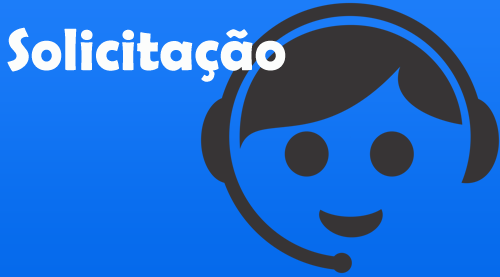
<style>
.page{position:relative;width:500px;height:277px}
.page>*{position:absolute;margin:0}
.t1{font:60px "BerlinSansFBDemi-Bold";color:#fcfdfc}
</style>
<div class="page">
<p class="t1" style="left:7px;top:27px;width:279px;height:55px">Solicitação</p>
</div>
